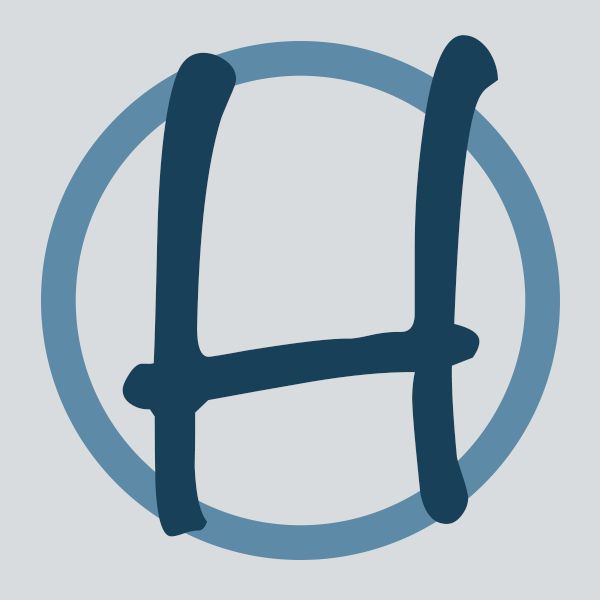
<style>
.page{position:relative;width:600px;height:600px;background:#d8dcde}
.page>*{position:absolute;margin:0}
.t1{font:567.8px "Noteworthy-Light";color:#184059}
</style>
<div class="page">
<p class="t1" style="left:122px;top:35px;width:377px;height:502px;rotate:1deg">H</p>
</div>
